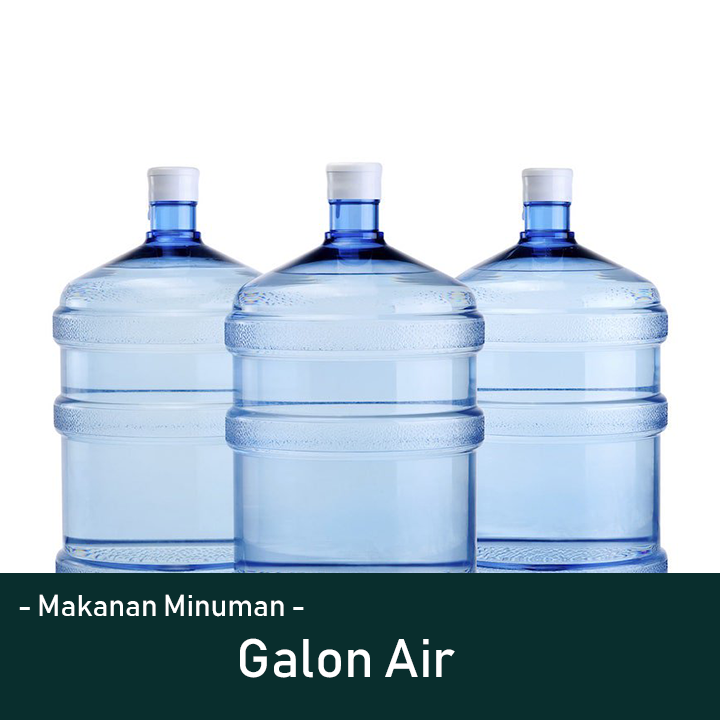
<style>
.page{position:relative;width:720px;height:720px;background:#ffffff}
.page>*{position:absolute;margin:0}
.t1{font:30px "Bahnschrift";color:#ffffff}
.t2{font:53.6px "Bahnschrift";color:#ffffff}
</style>
<div class="page">
<p class="t1" style="left:19px;top:594px;width:285px;height:23px">- Makanan Minuman -</p>
<p class="t2" style="left:240px;top:638px;width:215px;height:40px">Galon Air</p>
</div>
